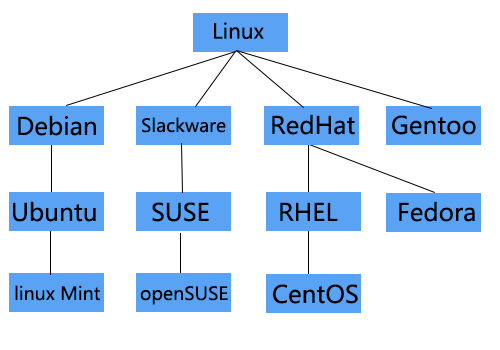
<style>
.page{position:relative;width:500px;height:350px;background:#ffffff}
.page>*{position:absolute;margin:0}
.t1{font:20.7px "MicrosoftYaHei";color:#000000}
.t2{font:24px "MicrosoftYaHei";color:#000000}
.t3{font:18px "MicrosoftYaHei";color:#000000}
</style>
<div class="page">
<p class="t1" style="left:214px;top:22px;width:50px;height:17px">Linux</p>
<p class="t2" style="left:18px;top:115px;width:78px;height:21px">Debian</p>
<p class="t3" style="left:142px;top:117px;width:84px;height:16px">Slackware</p>
<p class="t2" style="left:272px;top:114px;width:83px;height:21px">RedHat</p>
<p class="t2" style="left:392px;top:115px;width:84px;height:20px">Gentoo</p>
<p class="t2" style="left:13px;top:201px;width:83px;height:21px">Ubuntu</p>
<p class="t2" style="left:152px;top:202px;width:57px;height:20px">SUSE</p>
<p class="t2" style="left:280px;top:202px;width:58px;height:19px">RHEL</p>
<p class="t2" style="left:399px;top:201px;width:76px;height:21px">Fedora</p>
<p class="t3" style="left:15px;top:285px;width:85px;height:16px">linux Mint</p>
<p class="t3" style="left:140px;top:286px;width:88px;height:19px">openSUSE</p>
<p class="t2" style="left:273px;top:284px;width:85px;height:20px">CentOS</p>
</div>
